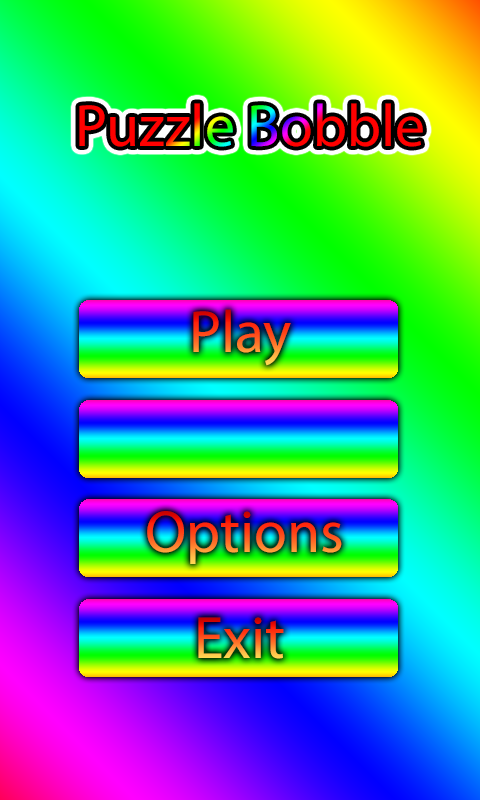
<style>
.page{position:relative;width:480px;height:800px}
.page>*{position:absolute;margin:0}
.t1{font:60px "MyriadPro-Regular"}
</style>
<div class="page">
<p class="t1" style="left:79px;top:103px;width:344px;height:44px">Puzzle Bobble</p>
<p class="t1" style="left:193px;top:309px;width:98px;height:57px">Play</p>
<p class="t1" style="left:147px;top:511px;width:195px;height:53px">Options</p>
<p class="t1" style="left:198px;top:617px;width:86px;height:42px">Exit</p>
</div>
